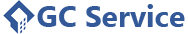
<style>
.page{position:relative;width:188px;height:34px;background:#ffffff}
.page>*{position:absolute;margin:0}
.t1{font:30px "MicrosoftNewTaiLue-Bold";color:#335998}
</style>
<div class="page">
<p class="t1" style="left:37px;top:4px;width:148px;height:23px">GC Service</p>
</div>
